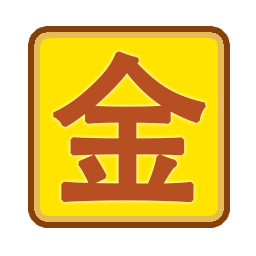
<style>
.page{position:relative;width:256px;height:256px;background:#ffffff}
.page>*{position:absolute;margin:0}
.t1{font:163.9px "AdobeHeitiStd-Regular";letter-spacing:0.06em;color:#b74f22;font-weight:bold}
</style>
<div class="page">
<p class="t1" style="left:53px;top:51px;width:153px;height:152px">金</p>
</div>
